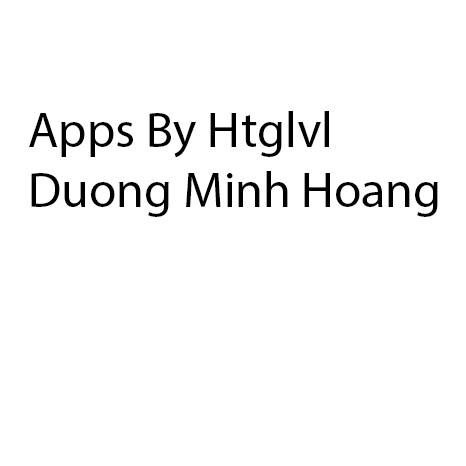
<style>
.page{position:relative;width:466px;height:466px;background:#ffffff}
.page>*{position:absolute;margin:0}
.t1{font:50px "MyriadPro-Regular";color:#000000}
</style>
<div class="page">
<p class="t1" style="left:29px;top:111px;width:409px;height:106px">Apps By Htglvl<br>Duong Minh Hoang</p>
</div>
